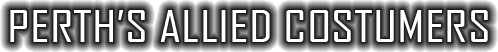
<style>
.page{position:relative;width:498px;height:52px}
.page>*{position:absolute;margin:0}
.t1{font:41.7px "AgencyFB-Reg";color:#ffffff;scale:1.32 1}
</style>
<div class="page">
<p class="t1" style="left:10px;top:10px;width:478px;height:32px">PERTH’S ALLIED COSTUMERS</p>
</div>
